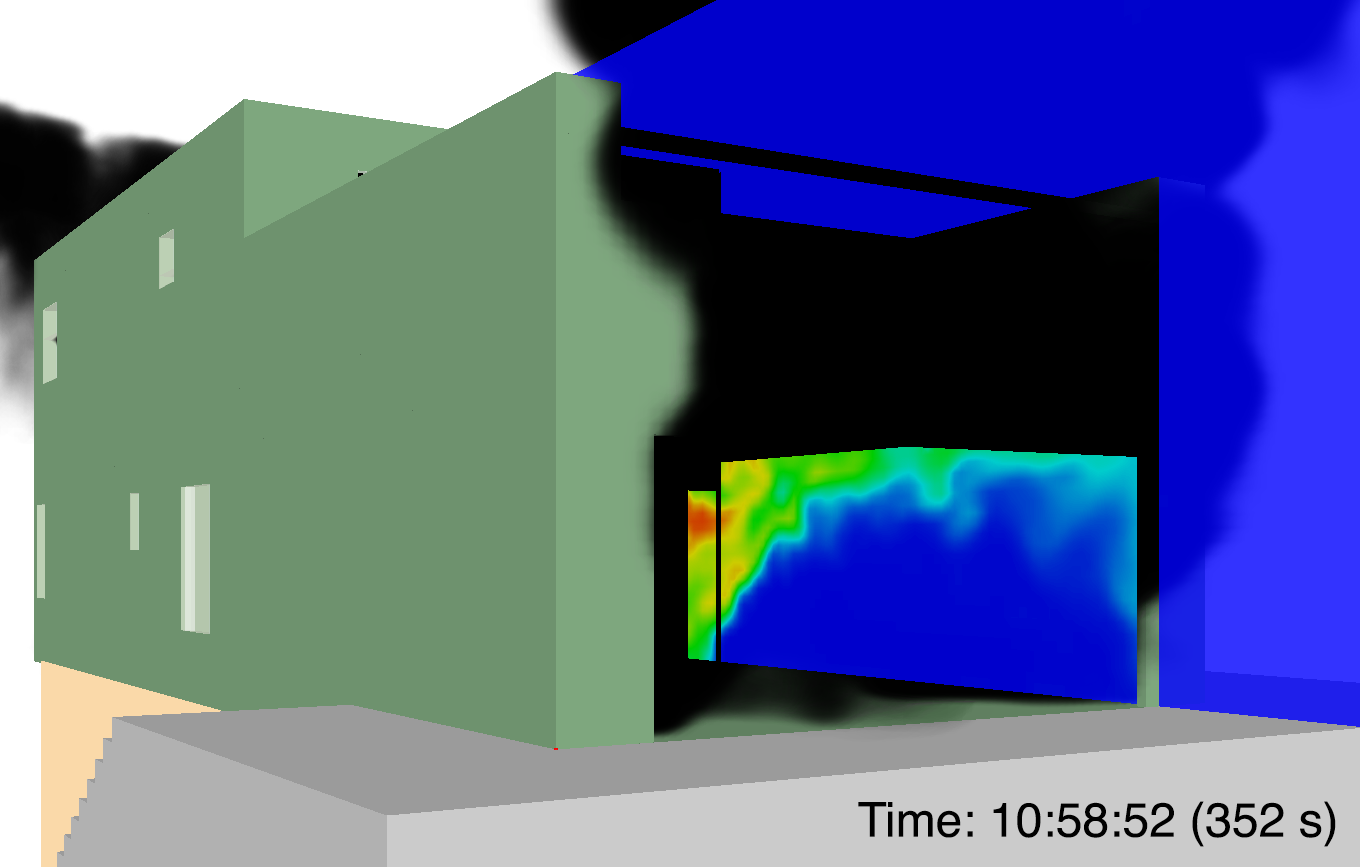
<style>
.page{position:relative;width:1360px;height:867px;background:#6e926e}
.page>*{position:absolute;margin:0}
.t1{font:48px "Helvetica";color:#000000}
</style>
<div class="page">
<p class="t1" style="left:858px;top:801px;width:478px;height:46px">Time: 10:58:52 (352 s)</p>
</div>
